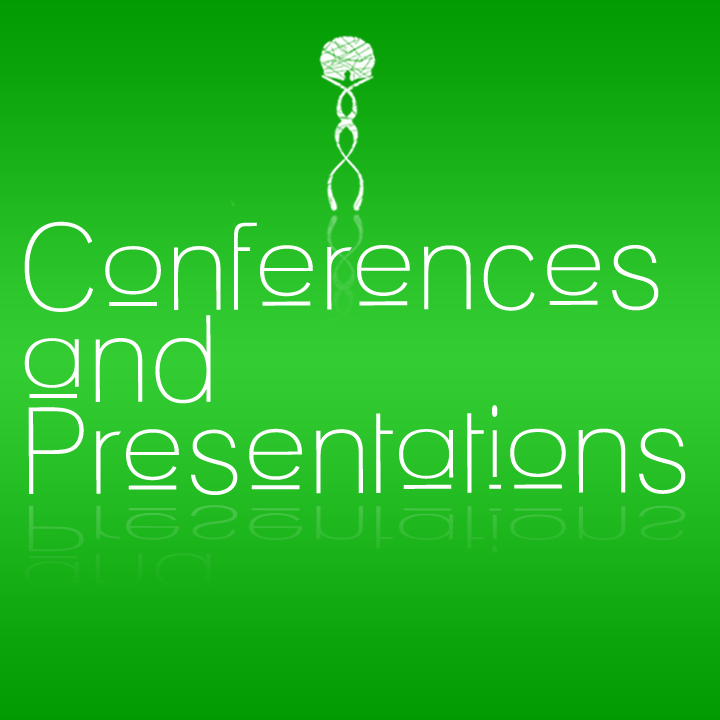
<style>
.page{position:relative;width:720px;height:720px}
.page>*{position:absolute;margin:0}
.t1{font:120px/45.9px "Lane-Upper";color:#ffffff}
.t2{font:62.9px/24px "Lane-Upper";scale:1.91 1}
</style>
<div class="page">
<p class="t1" style="left:24px;top:221px;width:662px;height:274px">Conferences<br><br>and<br><br>Presentations</p>
<p class="t2" style="left:24px;top:505px;width:662px;height:144px">Conferences<br><br>and<br><br>Presentations</p>
</div>
